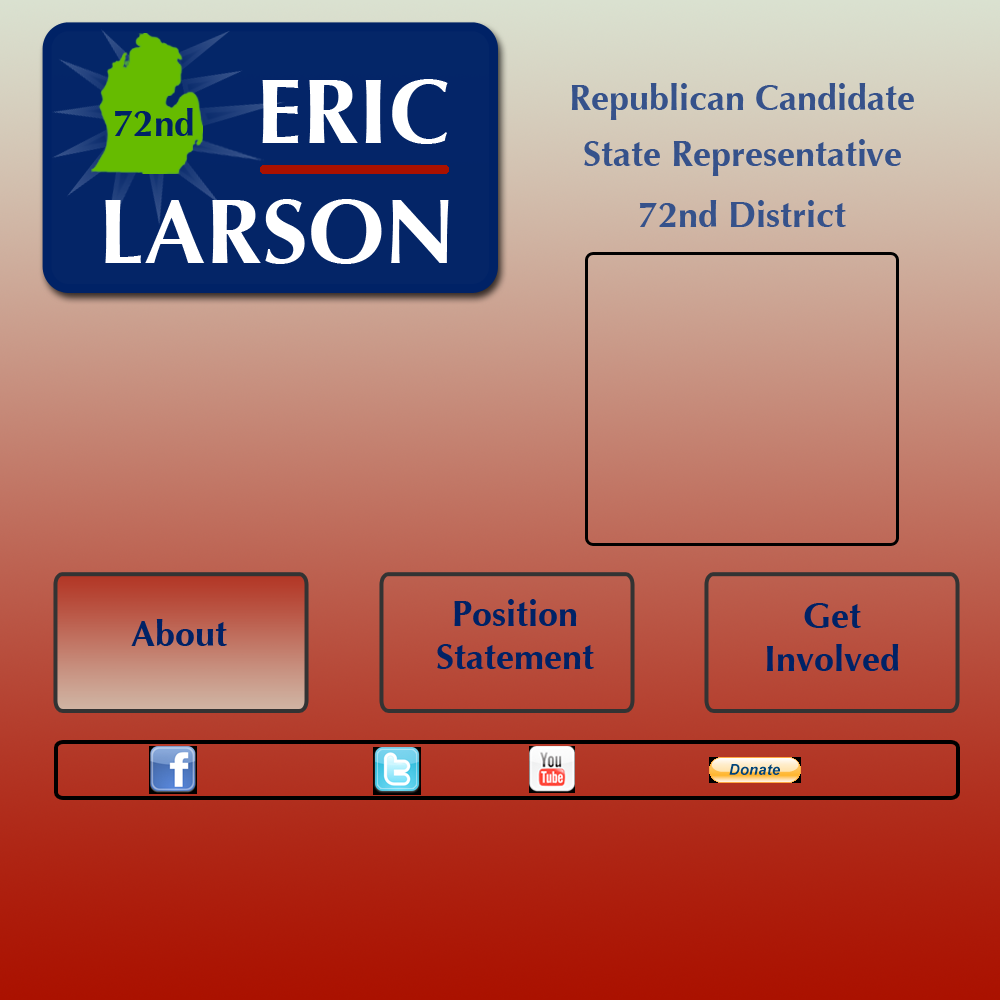
<style>
.page{position:relative;width:1000px;height:1000px}
.page>*{position:absolute;margin:0}
.t1{font:36px "Optima-Bold";color:#36528b}
.t2{font:36px "Optima-Bold";color:#002266}
</style>
<div class="page">
<p class="t1" style="left:571px;top:83px;width:343px;height:37px">Republican Candidate</p>
<p class="t1" style="left:584px;top:139px;width:317px;height:37px">State Representative</p>
<p class="t1" style="left:639px;top:200px;width:207px;height:27px">72nd District</p>
<p class="t2" style="left:437px;top:599px;width:157px;height:70px;text-align:center">Position<br>Statement</p>
<p class="t2" style="left:767px;top:603px;width:132px;height:68px;text-align:center">Get<br>Involved</p>
<p class="t2" style="left:131px;top:619px;width:96px;height:27px">About</p>
</div>
